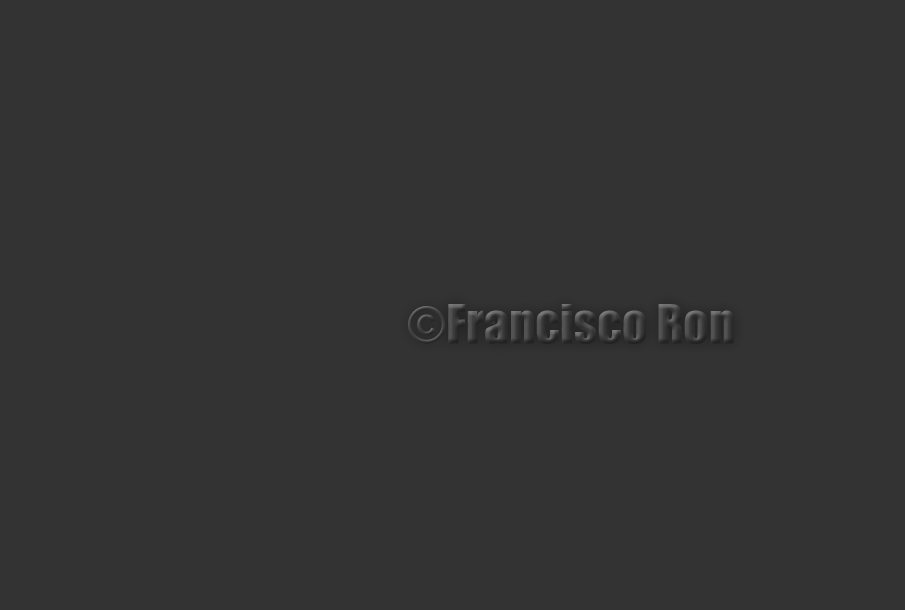
<style>
.page{position:relative;width:905px;height:610px;background:#333333}
.page>*{position:absolute;margin:0}
.t1{font:50px "Impact"}
</style>
<div class="page">
<p class="t1" style="left:408px;top:304px;width:326px;height:40px">©Francisco Ron</p>
</div>
